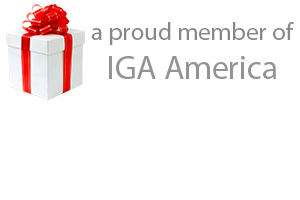
<style>
.page{position:relative;width:300px;height:200px;background:#ffffff}
.page>*{position:absolute;margin:0}
.t1{font:25px "MyriadPro-Regular";color:#8b8686}
.t2{font:33.3px "MyriadPro-Regular";color:#959292}
</style>
<div class="page">
<p class="t1" style="left:91px;top:22px;width:203px;height:23px">a proud member of</p>
<p class="t2" style="left:109px;top:56px;width:167px;height:23px">IGA America</p>
</div>
